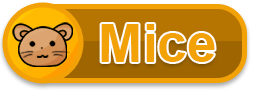
<style>
.page{position:relative;width:256px;height:96px}
.page>*{position:absolute;margin:0}
.t1{font:53.4px "Arial-BoldMT";color:#f2a207}
</style>
<div class="page">
<p class="t1" style="left:101px;top:24px;width:114px;height:38px">Mice</p>
</div>
